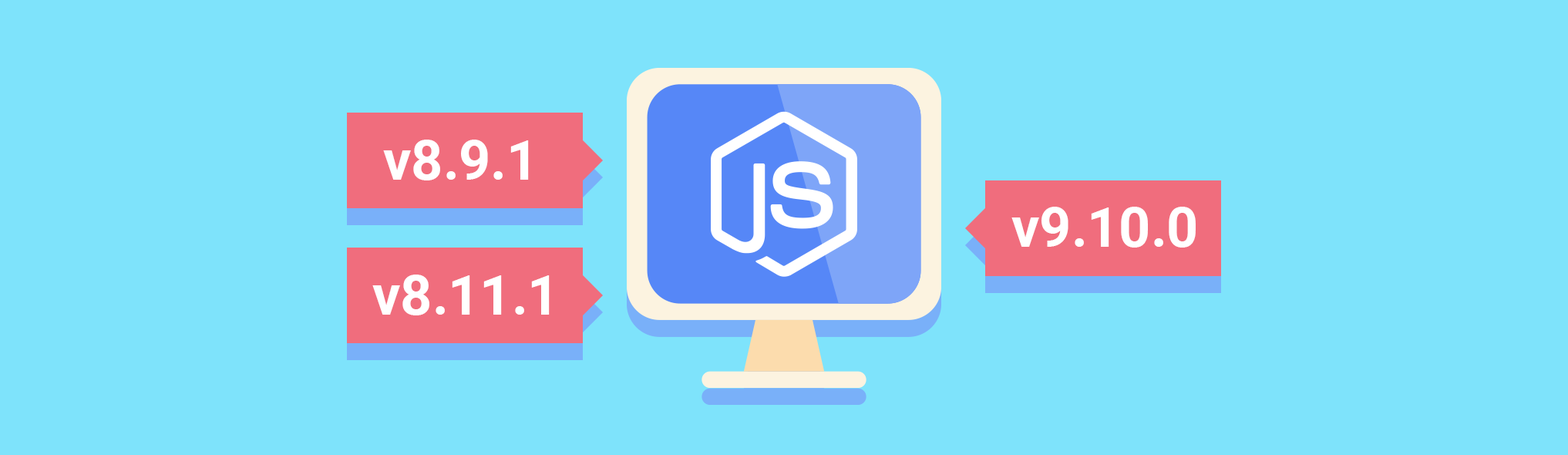
<style>
.page{position:relative;width:1568px;height:455px;background:#7ee3fb}
.page>*{position:absolute;margin:0}
.t1{font:27.6px "Roboto-Bold";color:#ffffff}
</style>
<div class="page">
<p class="t1" style="left:383px;top:140px;width:146px;height:40px">v8.9.1</p>
<p class="t1" style="left:1011px;top:207px;width:185px;height:40px">v9.10.0</p>
<p class="t1" style="left:372px;top:274px;width:178px;height:41px">v8.11.1</p>
</div>
